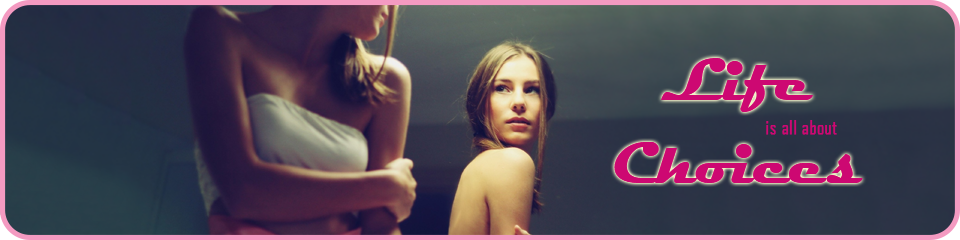
<style>
.page{position:relative;width:960px;height:240px}
.page>*{position:absolute;margin:0}
.t1{font:60px "Magneto-Bold";color:#cd0872}
.t2{font:18px "AgencyFB-Reg";color:#cd0872;font-weight:bold}
</style>
<div class="page">
<p class="t1" style="left:614px;top:58px;width:249px;height:125px;text-align:center">Life<br><br>Choices</p>
<p class="t2" style="left:766px;top:120px;width:71px;height:15px">is all about</p>
</div>
